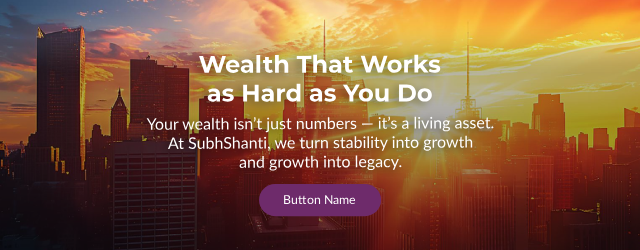
<style>
.page{position:relative;width:640px;height:250px}
.page>*{position:absolute;margin:0}
.t1{font:24px "Montserrat-Bold";color:#ffffff}
.t2{font:16px "Lato-Regular";color:#ffffff}
.t3{font:12.3px "Lato-Regular";color:#ffffff}
</style>
<div class="page">
<p class="t1" style="left:199px;top:54px;width:242px;height:48px;text-align:center">Wealth That Works<br>as Hard as You Do</p>
<p class="t2" style="left:146px;top:116px;width:348px;height:55px;text-align:center">Your wealth isn’t just numbers — it’s a living asset.<br>At SubhShanti, we turn stability into growth<br>and growth into legacy.</p>
<p class="t3" style="left:284px;top:195px;width:72px;height:9px">Button Name</p>
</div>
